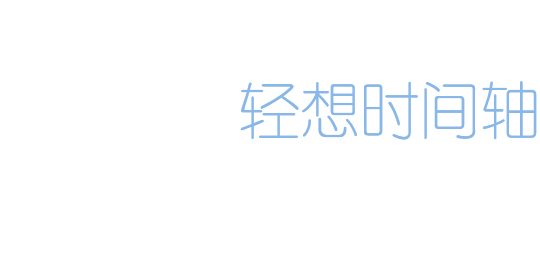
<style>
.page{position:relative;width:540px;height:261px;background:#ffffff}
.page>*{position:absolute;margin:0}
.t1{font:60px "FZY1K--GBK1-0";color:#89b7e7}
</style>
<div class="page">
<p class="t1" style="left:240px;top:81px;width:297px;height:59px">轻想时间轴</p>
</div>
